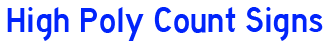
<style>
.page{position:relative;width:334px;height:46px;background:#ffffff}
.page>*{position:absolute;margin:0}
.t1{font:36px "HighwayGothic";color:#0124fb}
</style>
<div class="page">
<p class="t1" style="left:7px;top:7px;width:316px;height:34px">High Poly Count Signs</p>
</div>
